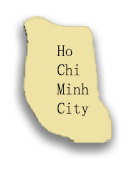
<style>
.page{position:relative;width:130px;height:170px;background:#ffffff}
.page>*{position:absolute;margin:0}
.t1{font:16px "SimSun";color:#222121}
</style>
<div class="page">
<p class="t1" style="left:57px;top:45px;width:32px;height:71px">Ho <br>Chi<br>Minh<br>City</p>
</div>
